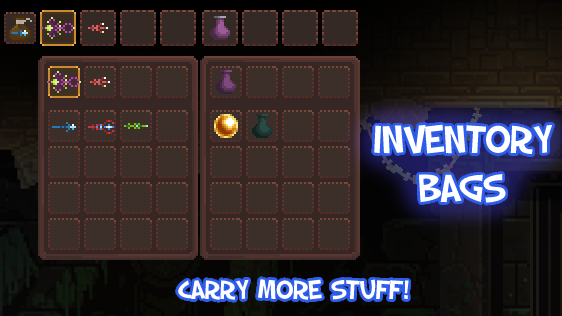
<style>
.page{position:relative;width:562px;height:316px}
.page>*{position:absolute;margin:0}
.t1{font:41px "SFSlapstickComic";color:#ffffff}
.t2{font:28px "SFSlapstickComic";color:#ffffff}
</style>
<div class="page">
<p class="t1" style="left:374px;top:124px;width:179px;height:79px;text-align:center">Inventory<br>Bags</p>
<p class="t2" style="left:178px;top:279px;width:231px;height:21px">Carry more Stuff!</p>
</div>
